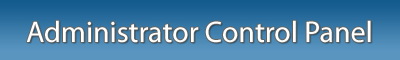
<style>
.page{position:relative;width:400px;height:60px}
.page>*{position:absolute;margin:0}
.t1{font:30px "MyriadPro-Regular";color:#ffffff}
</style>
<div class="page">
<p class="t1" style="left:26px;top:20px;width:345px;height:23px">Administrator Control Panel</p>
</div>
